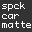
<style>
.page{position:relative;width:32px;height:32px;background:#333333}
.page>*{position:absolute;margin:0}
.t1{font:9px/8.4px "Monaco";letter-spacing:0.06em;color:#ffffff}
.t2{font:9px/10.4px "Monaco";letter-spacing:0.06em;color:#ffffff}
</style>
<div class="page">
<p class="t1" style="left:2px;top:2px;width:29px;height:26px">spck<br><span class="t2">car<br></span>matte</p>
</div>
